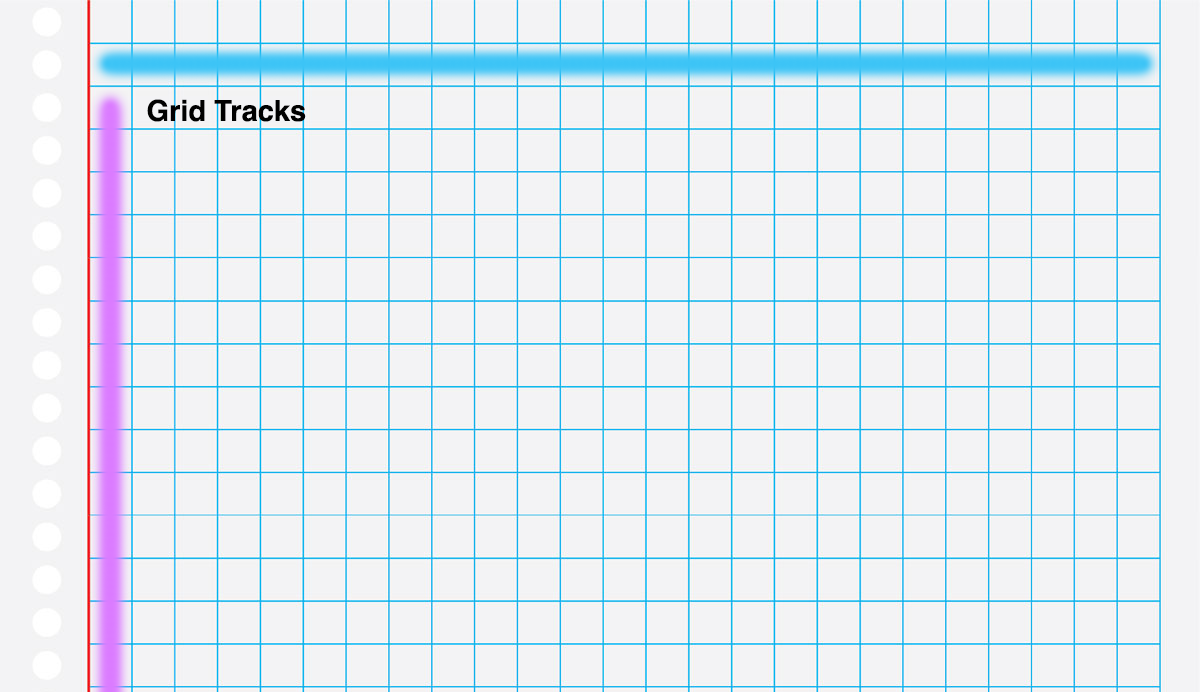
<style>
.page{position:relative;width:1200px;height:692px;background:#f3f3f5}
.page>*{position:absolute;margin:0}
.t1{font:29px "Helvetica-Bold";color:#000000}
</style>
<div class="page">
<p class="t1" style="left:147px;top:99px;width:159px;height:23px">Grid Tracks</p>
</div>
